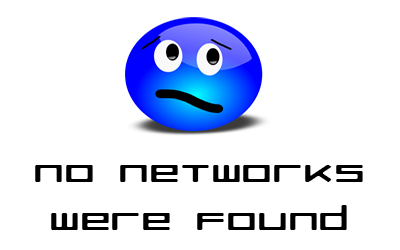
<style>
.page{position:relative;width:400px;height:250px;background:#ffffff}
.page>*{position:absolute;margin:0}
.t1{font:32px "RazerRegular";color:#000000;scale:1.5 1}
</style>
<div class="page">
<p class="t1" style="left:35px;top:165px;width:328px;height:65px;text-align:center">No networks<br>were found</p>
</div>
